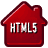
<style>
.page{position:relative;width:48px;height:48px;background:#ffffff}
.page>*{position:absolute;margin:0}
.t1{font:13px "Connection-Regular";letter-spacing:0.1em;color:#ffffff;font-weight:bold;scale:0.57 1}
</style>
<div class="page">
<p class="t1" style="left:10px;top:22px;width:27px;height:11px">HTML5</p>
</div>
